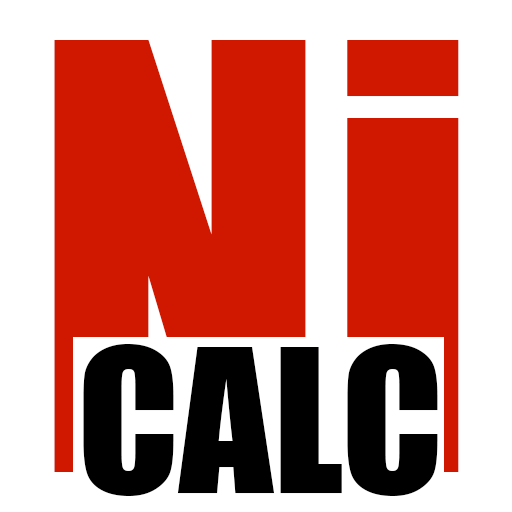
<style>
.page{position:relative;width:512px;height:512px;background:#ffffff}
.page>*{position:absolute;margin:0}
.t1{font:546.6px "Impact";color:#d01800}
.t2{font:184.8px "Impact";color:#000000}
</style>
<div class="page">
<p class="t1" style="left:54px;top:40px;width:405px;height:432px">Ni</p>
<p class="t2" style="left:83px;top:344px;width:355px;height:152px">CALC</p>
</div>
